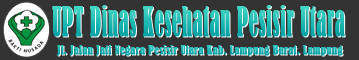
<style>
.page{position:relative;width:359px;height:60px;background:#333333}
.page>*{position:absolute;margin:0}
.t1{font:38.2px "BernardMT-Condensed";letter-spacing:0.025em;font-weight:bold;scale:0.52 1}
.t2{font:11px "BernardMT-Condensed";letter-spacing:0.025em;color:#19b2b1;font-weight:bold;scale:0.92 1}
</style>
<div class="page">
<p class="t1" style="left:52px;top:5px;width:293px;height:32px">UPT Dinas Kesehatan Pesisir Utara</p>
<p class="t2" style="left:56px;top:45px;width:287px;height:11px">Jl. Jalan Jati Negara Pesisir Utara Kab. Lampung Barat. Lampung</p>
</div>
